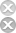
<style>
.page{position:relative;width:16px;height:33px;background:#ffffff}
.page>*{position:absolute;margin:0}
.t1{font:15.3px "TrebuchetMS-Bold";letter-spacing:-0.005em;color:#ffffff;scale:1.29 1}
</style>
<div class="page">
<p class="t1" style="left:2px;top:4px;width:12px;height:8px">x</p>
<p class="t1" style="left:2px;top:21px;width:12px;height:8px">x</p>
</div>
